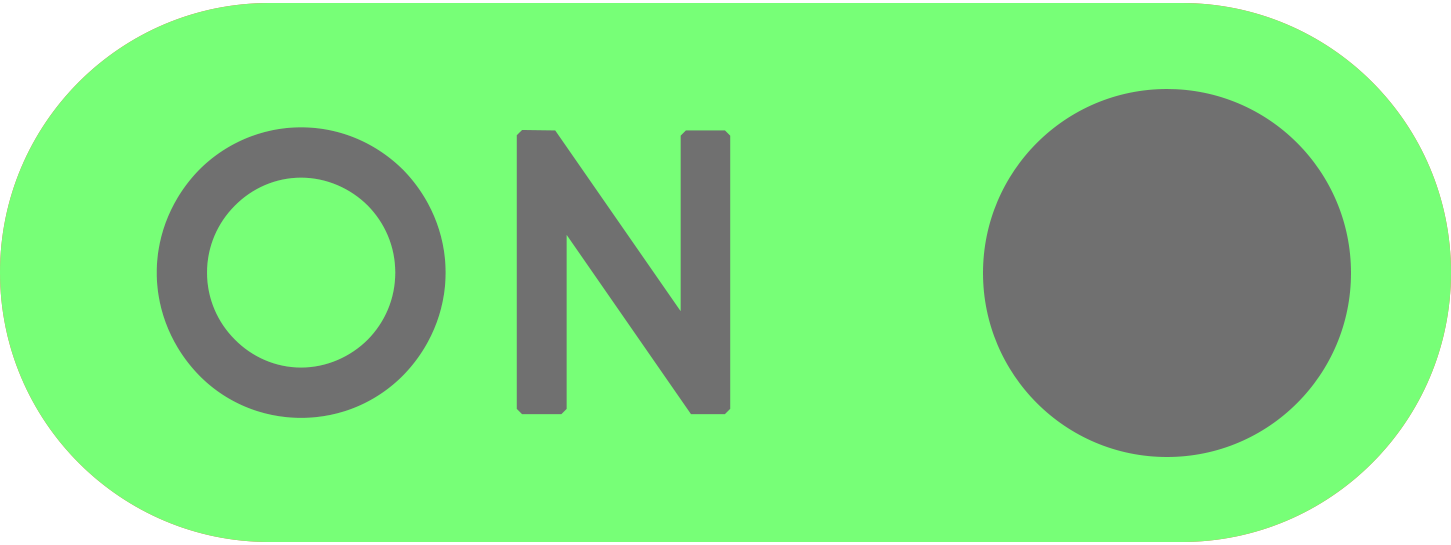
<style>
.page{position:relative;width:1451px;height:545px;background:#77ff77}
.page>*{position:absolute;margin:0}
.t1{font:390px "Code-Bold";letter-spacing:0.12em;color:#707070;font-weight:bold}
</style>
<div class="page">
<p class="t1" style="left:156px;top:127px;width:575px;height:291px">ON</p>
</div>
